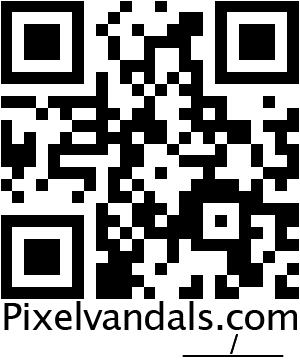
<style>
.page{position:relative;width:300px;height:360px;background:#ffffff}
.page>*{position:absolute;margin:0}
.t1{font:37.5px "LucidaSansUnicode";letter-spacing:-0.025em;color:#000000}
</style>
<div class="page">
<p class="t1" style="left:4px;top:301px;width:293px;height:29px">Pixelvandals.com</p>
</div>
